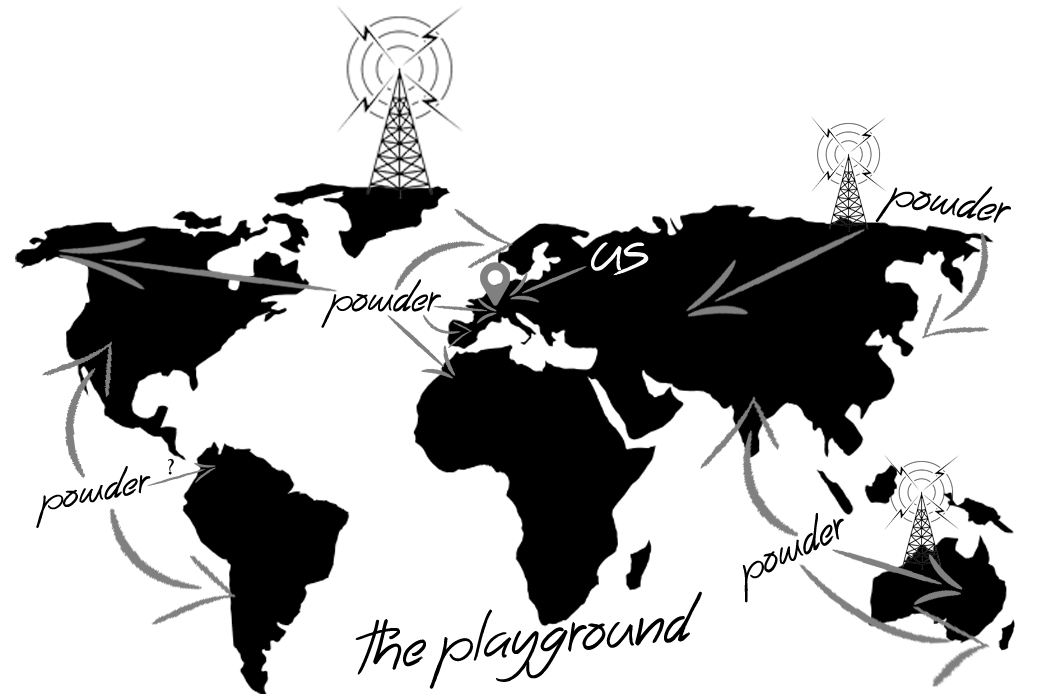
<style>
.page{position:relative;width:1040px;height:700px;background:#ffffff}
.page>*{position:absolute;margin:0}
.t1{font:36.9px "Tims-Grocery-Store";color:#000000}
.t2{font:56.5px "Tims-Grocery-Store";color:#fdfcfc}
.t3{font:33.5px "Tims-Grocery-Store";color:#000000}
.t4{font:22.1px "Tims-Grocery-Store";color:#000000}
.t5{font:30.5px "Tims-Grocery-Store";color:#000000;scale:1.11 1}
.t6{font:34.8px "Tims-Grocery-Store";color:#000000}
.t7{font:50px "Tims-Grocery-Store";color:#000000}
</style>
<div class="page">
<p class="t1" style="left:875px;top:186px;width:136px;height:37px;rotate:9deg">powder</p>
<p class="t2" style="left:591px;top:242px;width:58px;height:34px">us</p>
<p class="t3" style="left:321px;top:279px;width:121px;height:49px">powder</p>
<p class="t4" style="left:168px;top:458px;width:6px;height:17px">?</p>
<p class="t5" style="left:36px;top:466px;width:115px;height:62px;rotate:-11deg">powder</p>
<p class="t6" style="left:742px;top:513px;width:102px;height:90px;rotate:-26deg">powder</p>
<p class="t7" style="left:355px;top:591px;width:347px;height:98px;rotate:-5deg">The Playground</p>
</div>
